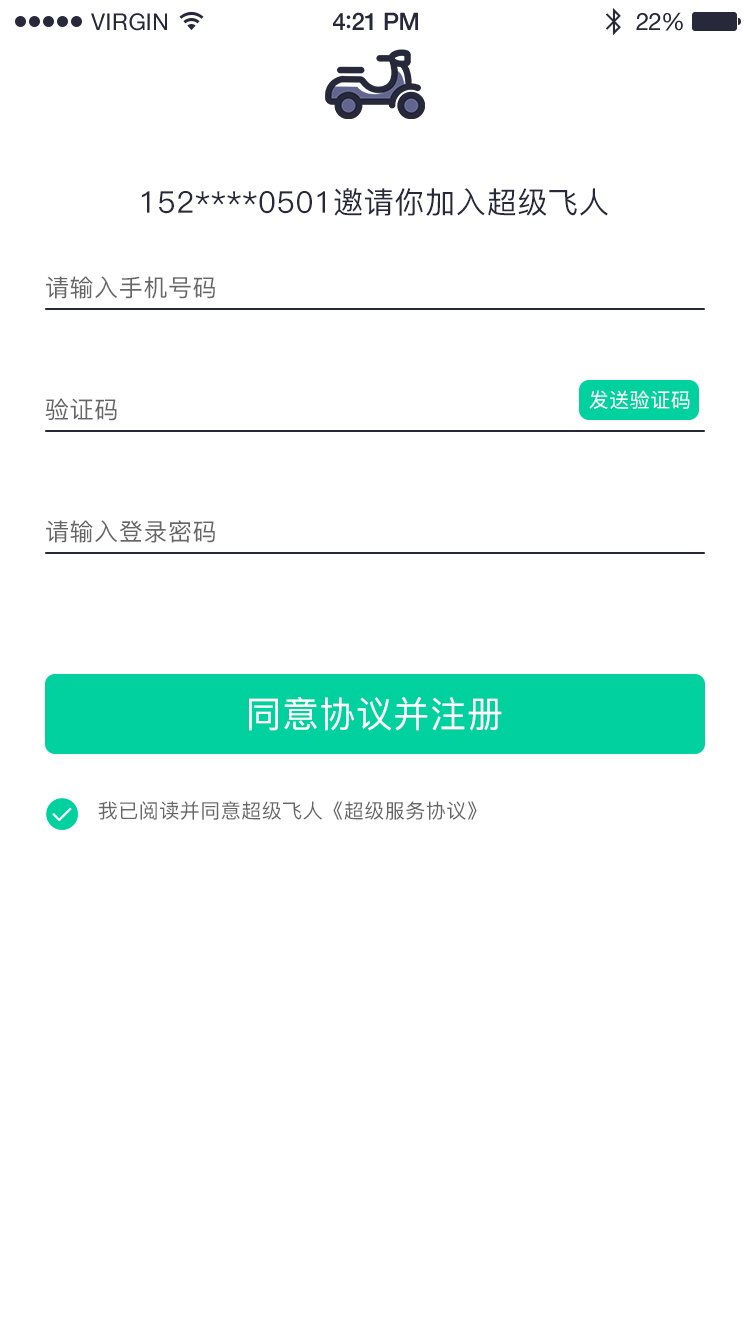
<style>
.page{position:relative;width:750px;height:1334px;background:#ffffff}
.page>*{position:absolute;margin:0}
.t1{font:23px "HelveticaNeue";letter-spacing:0.02em;color:#27283a}
.t2{font:24px "HelveticaNeue-Medium";letter-spacing:-0.02em;color:#27283a}
.t3{font:26px "Avenir-Medium";letter-spacing:-0.02em;color:#27283a}
.t4{font:24px "HelveticaNeue";letter-spacing:-0.02em;color:#27283a}
.t5{font:30px "PingFang-SC-Medium";letter-spacing:0.025em;color:#27283a}
.t6{font:24px "PingFang-SC-Medium";letter-spacing:0.025em;color:#666666}
.t7{font:20px "PingFang-SC-Medium";letter-spacing:0.025em;color:#ffffff}
.t8{font:36px "PingFang-SC-Medium";letter-spacing:0.025em;color:#ffffff}
.t9{font:20px "PingFang-SC-Medium";letter-spacing:0.025em;color:#666666}
</style>
<div class="page">
<p class="t1" style="left:91px;top:13px;width:76px;height:18px">VIRGIN</p>
<p class="t2" style="left:333px;top:12px;width:85px;height:18px">4<span class="t3">:</span>21 PM</p>
<p class="t4" style="left:636px;top:12px;width:47px;height:19px">22%</p>
<p class="t5" style="left:142px;top:188px;width:466px;height:28px">152****0501邀请你加入超级飞人</p>
<p class="t6" style="left:46px;top:276px;width:169px;height:23px">请输入手机号码</p>
<p class="t7" style="left:589px;top:390px;width:101px;height:19px">发送验证码</p>
<p class="t6" style="left:45px;top:398px;width:72px;height:23px">验证码</p>
<p class="t6" style="left:46px;top:520px;width:169px;height:23px">请输入登录密码</p>
<p class="t8" style="left:249px;top:697px;width:253px;height:34px">同意协议并注册</p>
<p class="t9" style="left:98px;top:801px;width:379px;height:19px">我已阅读并同意超级飞人《超级服务协议》</p>
</div>
